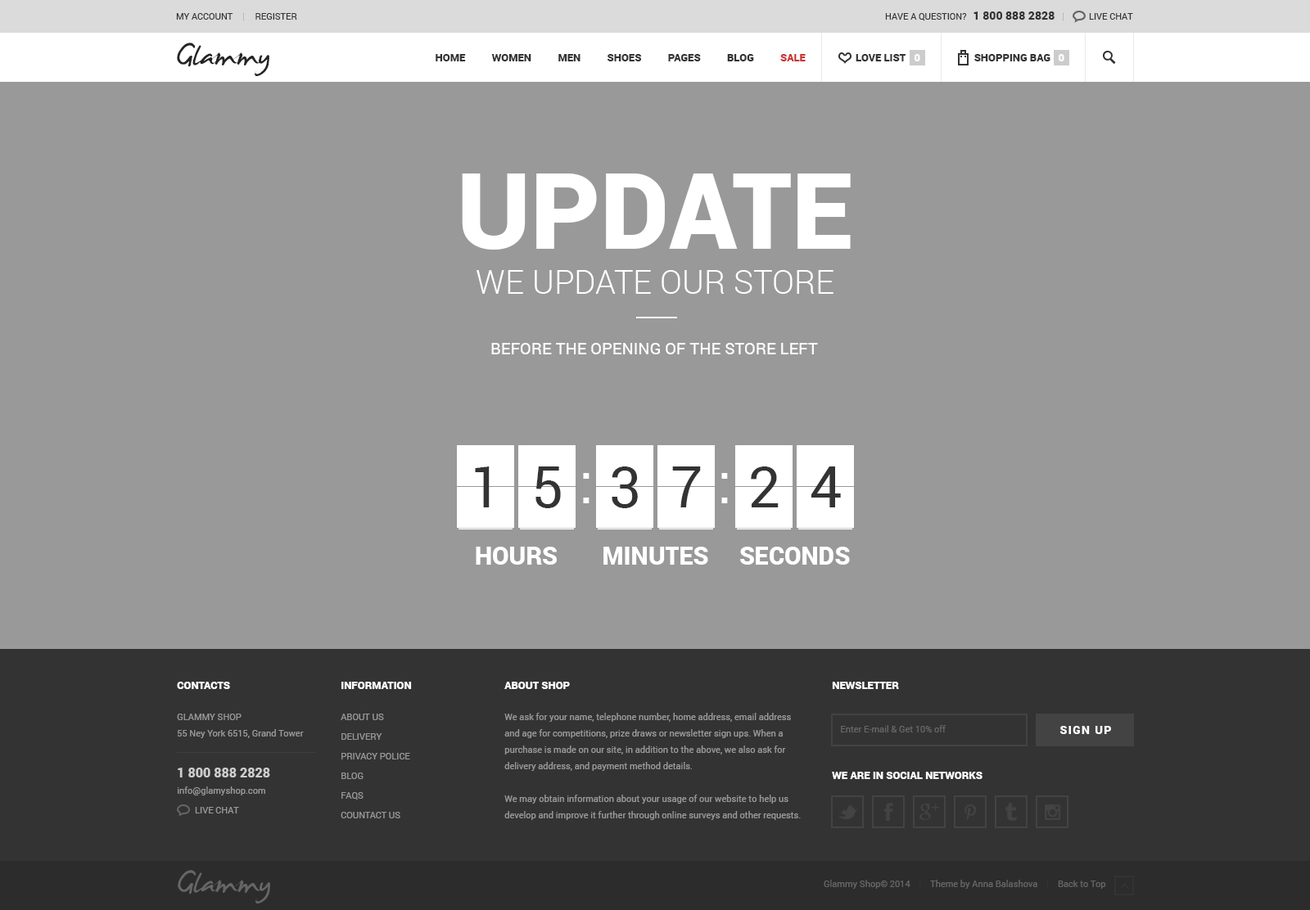
<style>
.page{position:relative;width:1310px;height:910px;background:#999999}
.page>*{position:absolute;margin:0}
.t1{font:9px "Roboto-Regular";color:#333333;text-transform:uppercase}
.t2{font:11.5px "Roboto-Black";color:#333333;text-transform:uppercase}
.t3{font:49.1px "JamesFajardo";color:#242424}
.t4{font:10.6px "Roboto-Black";color:#333333;text-transform:uppercase}
.t5{font:10.6px "Roboto-Black";color:#cc3333;text-transform:uppercase}
.t6{font:10.6px "Roboto-Black";color:#ffffff;text-transform:uppercase}
.t7{font:106.4px "Roboto-Black";color:#ffffff;text-transform:uppercase}
.t8{font:32.7px "Roboto-Light";color:#ffffff;text-transform:uppercase}
.t9{font:16.4px "Roboto-Regular";color:#ffffff;text-transform:uppercase}
.t10{font:57.3px "Roboto-Regular";color:#333333;text-transform:uppercase}
.t11{font:57.3px "Roboto-Regular";color:#ffffff;text-transform:uppercase}
.t12{font:24.6px "Roboto-Black";color:#ffffff;text-transform:uppercase}
.t13{font:9px/16.4px "Roboto-Regular";color:#999999}
.t14{font:9px/19.6px "Roboto-Regular";color:#999999;text-transform:uppercase}
.t15{font:13.1px/40.9px "Roboto-Black";color:#cccccc}
.t16{font:9px "Roboto-Regular";color:#666666}
.t17{font:11.5px "Roboto-Black";letter-spacing:0.1em;color:#ffffff;text-transform:uppercase}
.t18{font:9px "Roboto-Regular";color:#333333}
</style>
<div class="page">
<p class="t1" style="left:176px;top:13px;width:121px;height:7px">MY ACCOUNT          Register</p>
<p class="t1" style="left:885px;top:11px;width:169px;height:9px">HAVE A QUESTION?   <span class="t2">1 800 888 2828</span></p>
<p class="t1" style="left:1089px;top:13px;width:44px;height:7px">Live chat</p>
<p class="t3" style="left:177px;top:43px;width:92px;height:33px">Glammy</p>
<p class="t4" style="left:436px;top:54px;width:370px;height:7px">Home          women          men          shoes          pages          Blog          <span class="t5">sale</span></p>
<p class="t4" style="left:856px;top:54px;width:49px;height:7px">Love list</p>
<p class="t6" style="left:914px;top:54px;width:6px;height:7px">0</p>
<p class="t4" style="left:974px;top:54px;width:76px;height:7px">shopping bag</p>
<p class="t6" style="left:1058px;top:54px;width:6px;height:7px">0</p>
<p class="t7" style="left:462px;top:174px;width:389px;height:76px">UPDATE</p>
<p class="t8" style="left:476px;top:270px;width:357px;height:24px">we update our store</p>
<p class="t9" style="left:491px;top:343px;width:327px;height:11px">before the opening of the store left</p>
<p class="t10" style="left:475px;top:467px;width:15px;height:41px">1</p>
<p class="t10" style="left:535px;top:467px;width:26px;height:41px">5</p>
<p class="t11" style="left:583px;top:473px;width:6px;height:30px">:</p>
<p class="t10" style="left:612px;top:467px;width:26px;height:41px">3</p>
<p class="t10" style="left:672px;top:467px;width:29px;height:41px">7</p>
<p class="t11" style="left:721px;top:473px;width:7px;height:30px">:</p>
<p class="t10" style="left:751px;top:467px;width:28px;height:41px">2</p>
<p class="t10" style="left:810px;top:467px;width:31px;height:41px">4</p>
<p class="t12" style="left:476px;top:547px;width:81px;height:18px">hours</p>
<p class="t12" style="left:603px;top:547px;width:105px;height:18px">minutes</p>
<p class="t12" style="left:740px;top:547px;width:110px;height:18px">seconds</p>
<p class="t6" style="left:177px;top:682px;width:53px;height:7px">Contacts</p>
<p class="t6" style="left:341px;top:682px;width:71px;height:7px">Information</p>
<p class="t6" style="left:504px;top:682px;width:66px;height:7px">About shop</p>
<p class="t6" style="left:832px;top:682px;width:67px;height:7px">NEWSLETTER</p>
<p class="t13" style="left:177px;top:714px;width:127px;height:100px"><span class="t14">Glammy Shop<br></span>55 Ney York 6515, Grand Tower<br><span class="t15">1 800 888 2828<br></span>info@glamyshop.com<br><span class="t14">        Live chat</span></p>
<p class="t14" style="left:341px;top:714px;width:69px;height:105px">About us<br>Delivery<br>Privacy police<br>Blog<br>Faqs<br>countact us</p>
<p class="t13" style="left:504px;top:713px;width:297px;height:107px">We ask for your name, telephone number, home address, email address and age for competitions, prize draws or newsletter sign ups. When a purchase is made on our site, in addition to the above, we also ask for delivery address, and payment method details. <br><br>We may obtain information about your usage of our website to help us develop and improve it further through online surveys and other requests.</p>
<p class="t16" style="left:841px;top:725px;width:105px;height:8px">Enter E-mail &amp; Get 10% off</p>
<p class="t17" style="left:1060px;top:726px;width:51px;height:8px">SIGN UP</p>
<p class="t6" style="left:832px;top:772px;width:150px;height:7px">we are in social networks</p>
<p class="t16" style="left:824px;top:880px;width:282px;height:9px">Glammy Shop© 2014<span class="t18">    |    </span>Theme by Anna Balashova<span class="t18">    |    </span>Back to Top</p>
</div>
